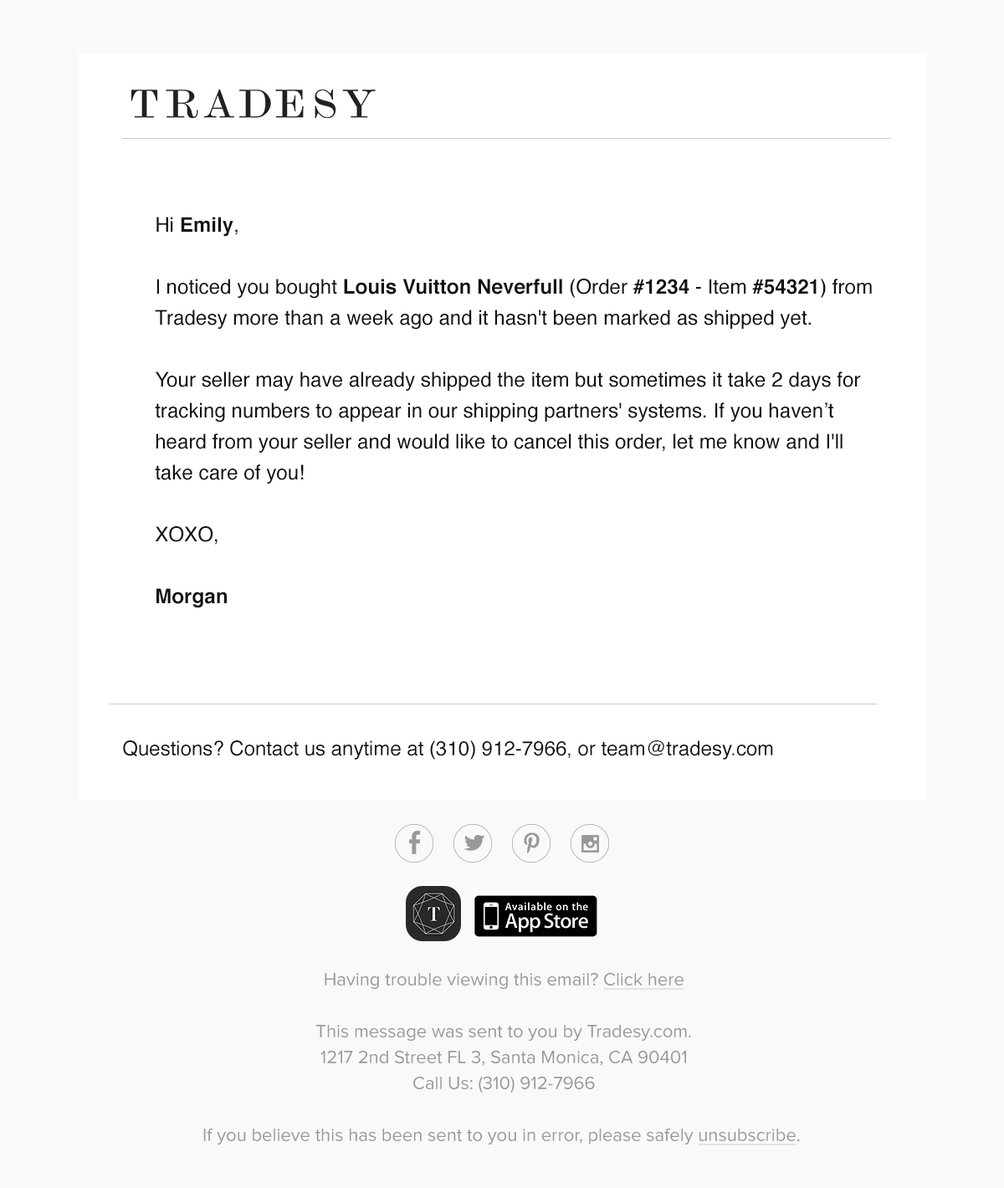
<style>
.page{position:relative;width:1004px;height:1188px;background:#ffffff}
.page>*{position:absolute;margin:0}
.t1{font:20.2px/31px "Helvetica";color:#111111}
.t2{font:20.2px/31px "Helvetica-Bold";color:#111111}
.t3{font:20.1px "Helvetica";color:#111111}
.t4{font:18.4px/25.9px "ProximaNova-Regular";color:#999999}
.t5{font:18.4px/25.9px "ProximaNova-Regular";color:#999999;text-decoration:underline}
</style>
<div class="page">
<p class="t1" style="left:155px;top:217px;width:717px;height:391px">Hi <span class="t2">Emily</span>,<br><br>I noticed you bought<span class="t2"> Louis Vuitton Neverfull </span>(Order <span class="t2">#1234</span> - Item <span class="t2">#54321</span>) from Tradesy more than a week ago and it hasn't been marked as shipped yet.<br><br>Your seller may have already shipped the item but sometimes it take 2 days for tracking numbers to appear in our shipping partners' systems. If you haven’t heard from your seller and would like to cancel this order, let me know and I'll take care of you!<br><br>XOXO,<br><br><span class="t2">Morgan</span></p>
<p class="t3" style="left:123px;top:740px;width:650px;height:20px">Questions? Contact us anytime at (310) 912-7966, or team@tradesy.com</p>
<p class="t4" style="left:203px;top:972px;width:597px;height:173px;text-align:center">Having trouble viewing this email? <span class="t5">Click here<br></span><br>This message was sent to you by Tradesy.com.<br>1217 2nd Street FL 3, Santa Monica, CA 90401<br>Call Us: (310) 912-7966<br><br>If you believe this has been sent to you in error, please safely <span class="t5">unsubscribe</span>.</p>
</div>
